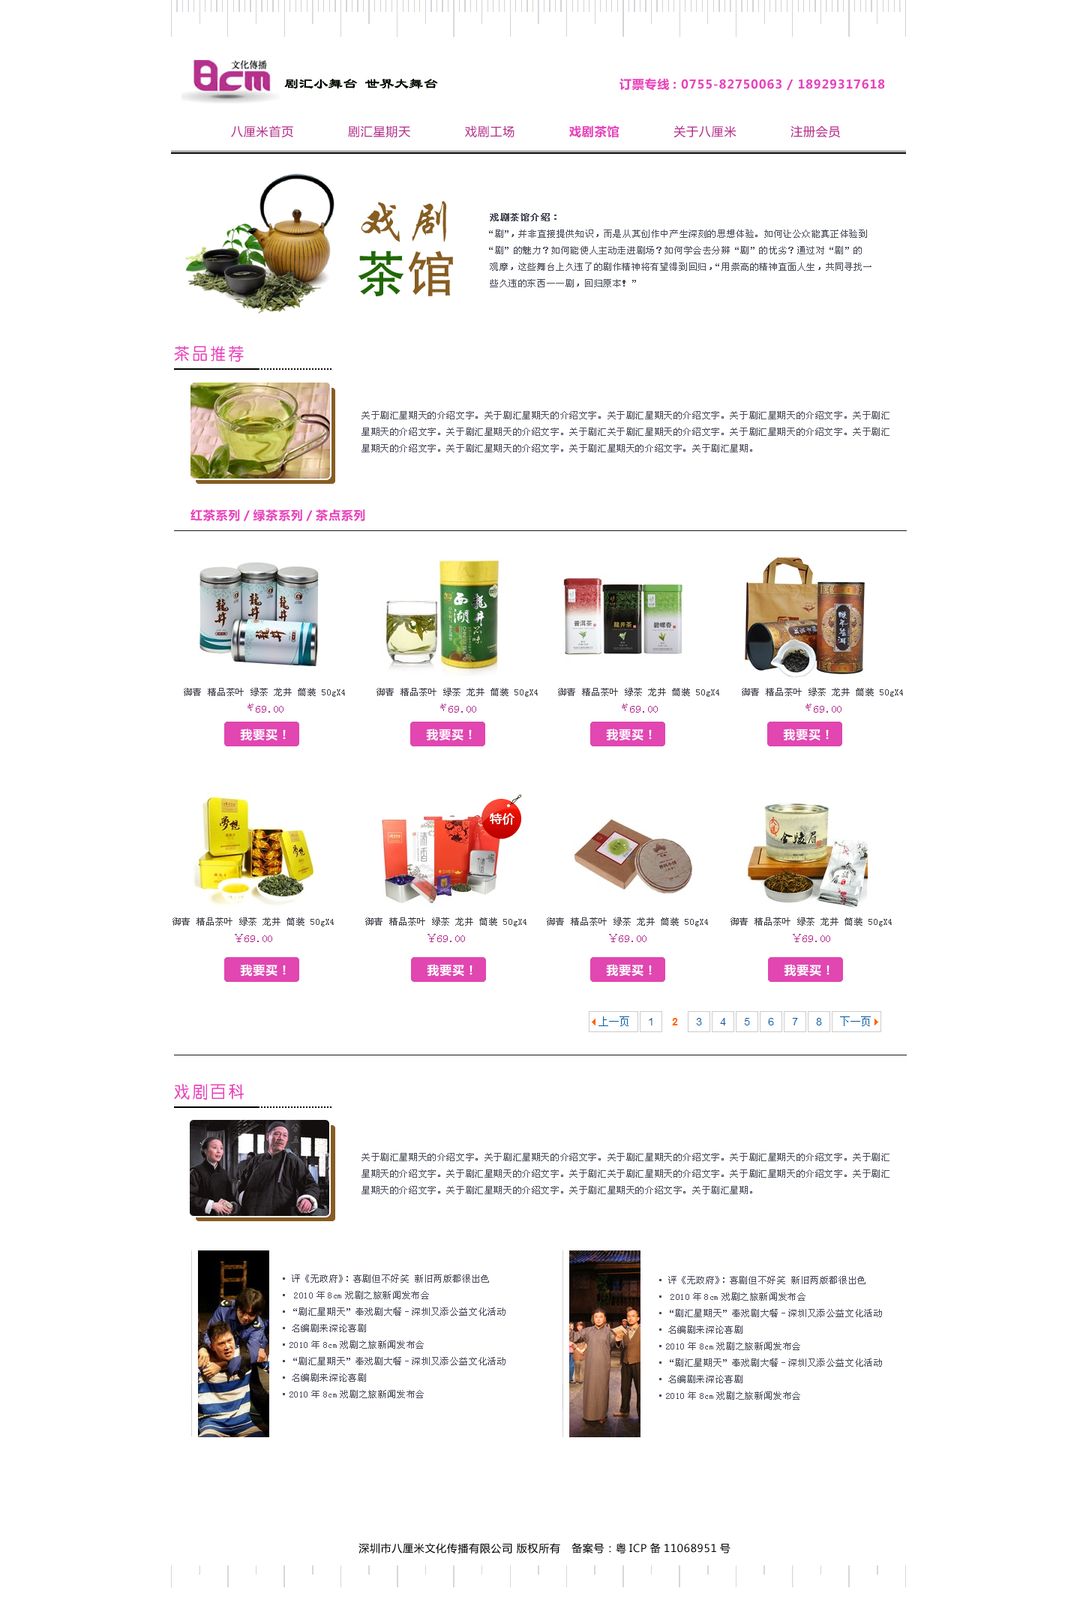
<style>
.page{position:relative;width:1080px;height:1612px;background:#ffffff}
.page>*{position:absolute;margin:0}
.t1{font:12px "MicrosoftYaHei";letter-spacing:0.05em;color:#e843bb}
.t2{font:12px "MicrosoftYaHei";letter-spacing:0.05em;color:#b32e8a}
.t3{font:48px/16.5px "SingkaiCSEG-Bold-GB";letter-spacing:0.05em;color:#875d22}
.t4{font:48px/16.5px "HeitiCSEG-Medium-GB";letter-spacing:0.05em;color:#206804}
.t5{font:48px/16.5px "HeitiCSEG-Medium-GB";letter-spacing:0.05em;color:#875d22}
.t6{font:9px/16.5px "SimSun";letter-spacing:0.05em;color:#4b4e5b}
.t7{font:9px/16.5px "SimSun";letter-spacing:0.05em;color:#4b4e5b;font-weight:bold}
.t8{font:17.3px "ÖÐÔ²Ìå-Regular";letter-spacing:0.05em;color:#e843bb}
.t9{font:9px/16.5px "SimSun";letter-spacing:0.05em;color:#3d3e45}
.t10{font:10.5px/16.5px "SimSun";letter-spacing:0.05em;color:#b32e8a}
.t11{font:10.5px "MicrosoftYaHei";letter-spacing:0.05em;color:#000000}
</style>
<div class="page">
<p class="t1" style="left:620px;top:78px;width:265px;height:13px">订票专线: 0755-82750063 / 18929317618</p>
<p class="t2" style="left:231px;top:125px;width:610px;height:13px">八厘米首页             剧汇星期天             戏剧工场             <span class="t1">戏剧茶馆</span>             关于八厘米             注册会员</p>
<p class="t3" style="left:358px;top:201px;width:95px;height:95px">戏剧<br><br><br><span class="t4">茶</span><span class="t5">馆</span></p>
<p class="t6" style="left:489px;top:213px;width:383px;height:74px"><span class="t7">戏剧茶馆介绍：<br></span>“剧”，并非直接提供知识，而是从其创作中产生深刻的思想体验。如何让公众能真正体验到<br>“剧”的魅力？如何能使人主动走进剧场？如何学会去分辨“剧”的优劣？通过对“剧”的<br>观摩，这些舞台上久违了的剧作精神将有望得到回归，“用崇高的精神直面人生，共同寻找一<br>些久违的东西——剧，回归原本！”</p>
<p class="t8" style="left:174px;top:346px;width:70px;height:16px">茶品推荐</p>
<p class="t6" style="left:362px;top:411px;width:528px;height:41px">关于剧汇星期天的介绍文字。关于剧汇星期天的介绍文字。关于剧汇星期天的介绍文字。关于剧汇星期天的介绍文字。关于剧汇<br>星期天的介绍文字。关于剧汇星期天的介绍文字。关于剧汇关于剧汇星期天的介绍文字。关于剧汇星期天的介绍文字。关于剧汇<br>星期天的介绍文字。关于剧汇星期天的介绍文字。关于剧汇星期天的介绍文字。关于剧汇星期。</p>
<p class="t1" style="left:190px;top:509px;width:175px;height:12px">红茶系列/绿茶系列/茶点系列</p>
<p class="t9" style="left:184px;top:688px;width:161px;height:24px;text-align:center">御青 精品茶叶 绿茶 龙井 筒装 50gX4<br><span class="t10">￥69.00</span></p>
<p class="t9" style="left:376px;top:688px;width:162px;height:24px;text-align:center">御青 精品茶叶 绿茶 龙井 筒装 50gX4<br><span class="t10">￥69.00</span></p>
<p class="t9" style="left:558px;top:688px;width:161px;height:24px;text-align:center">御青 精品茶叶 绿茶 龙井 筒装 50gX4<br><span class="t10">￥69.00</span></p>
<p class="t9" style="left:742px;top:688px;width:161px;height:24px;text-align:center">御青 精品茶叶 绿茶 龙井 筒装 50gX4<br><span class="t10">￥69.00</span></p>
<p class="t8" style="left:174px;top:1084px;width:70px;height:16px">戏剧百科</p>
<p class="t6" style="left:362px;top:1153px;width:528px;height:41px">关于剧汇星期天的介绍文字。关于剧汇星期天的介绍文字。关于剧汇星期天的介绍文字。关于剧汇星期天的介绍文字。关于剧汇<br>星期天的介绍文字。关于剧汇星期天的介绍文字。关于剧汇关于剧汇星期天的介绍文字。关于剧汇星期天的介绍文字。关于剧汇<br>星期天的介绍文字。关于剧汇星期天的介绍文字。关于剧汇星期天的介绍文字。关于剧汇星期。</p>
<p class="t6" style="left:283px;top:1274px;width:223px;height:124px">·评《无政府》：喜剧但不好笑 新旧两版都很出色<br>· 2010年8cm戏剧之旅新闻发布会<br>·“剧汇星期天”奉戏剧大餐-深圳又添公益文化活动<br>·名编剧来深论喜剧<br>·2010年8cm戏剧之旅新闻发布会<br>·“剧汇星期天”奉戏剧大餐-深圳又添公益文化活动<br>·名编剧来深论喜剧<br>·2010年8cm戏剧之旅新闻发布会</p>
<p class="t6" style="left:659px;top:1276px;width:223px;height:124px">·评《无政府》：喜剧但不好笑 新旧两版都很出色<br>· 2010年8cm戏剧之旅新闻发布会<br>·“剧汇星期天”奉戏剧大餐-深圳又添公益文化活动<br>·名编剧来深论喜剧<br>·2010年8cm戏剧之旅新闻发布会<br>·“剧汇星期天”奉戏剧大餐-深圳又添公益文化活动<br>·名编剧来深论喜剧<br>·2010年8cm戏剧之旅新闻发布会</p>
<p class="t11" style="left:358px;top:1543px;width:372px;height:10px">深圳市八厘米文化传播有限公司 版权所有   备案号：粤ICP备11068951号</p>
</div>
